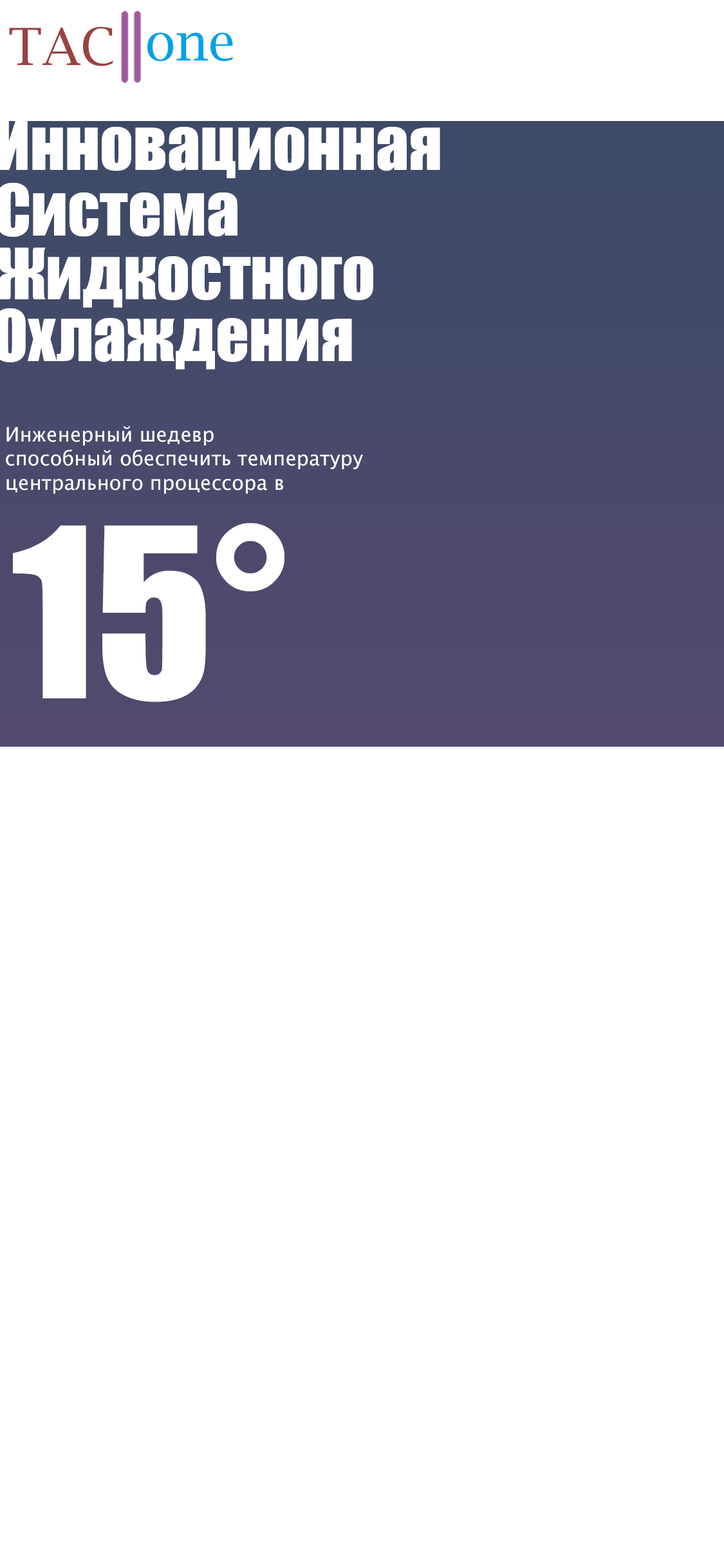
<style>
.page{position:relative;width:724px;height:1568px;background:#ffffff}
.page>*{position:absolute;margin:0}
.t1{font:51.3px "LucidaBright";color:#9a4242}
.t2{font:51.3px "LucidaBright";color:#00a2e7}
.t3{font:19.9px "LucidaGrande";color:#ffffff}
.t4{font:218.7px "Impact";color:#ffffff}
</style>
<div class="page">
<p class="t1" style="left:9px;top:26px;width:104px;height:40px">TAC</p>
<p class="t2" style="left:147px;top:32px;width:86px;height:29px">one</p>
<p class="t3" style="left:6px;top:426px;width:357px;height:68px">Инженерный шедевр<br>способный обеспечить температуру <br>центрального процессора в</p>
<p class="t4" style="left:13px;top:523px;width:272px;height:179px">15°</p>
</div>
